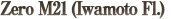
<style>
.page{position:relative;width:172px;height:19px;background:#ffffff}
.page>*{position:absolute;margin:0}
.t1{font:18px "RyuminPro-ExBold";letter-spacing:-0.08em;color:#4a3f32;font-weight:bold;scale:0.9 1}
</style>
<div class="page">
<p class="t1" style="left:0px;top:1px;width:165px;height:18px">Zero M21 (Iwamoto Fl.)</p>
</div>
